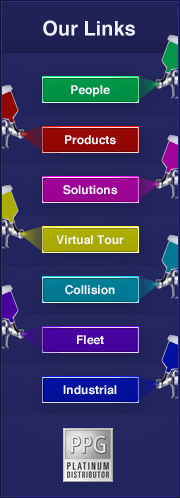
<style>
.page{position:relative;width:180px;height:498px}
.page>*{position:absolute;margin:0}
.t1{font:20px "Helvetica-Bold";color:#f2f2fa}
.t2{font:12px "Helvetica-Bold";color:#f2f2fa}
</style>
<div class="page">
<p class="t1" style="left:43px;top:20px;width:92px;height:16px">Our Links</p>
<p class="t2" style="left:71px;top:85px;width:39px;height:12px">People</p>
<p class="t2" style="left:65px;top:135px;width:51px;height:10px">Products</p>
<p class="t2" style="left:63px;top:185px;width:55px;height:10px">Solutions</p>
<p class="t2" style="left:56px;top:235px;width:68px;height:10px">Virtual Tour</p>
<p class="t2" style="left:65px;top:285px;width:50px;height:10px">Collision</p>
<p class="t2" style="left:77px;top:335px;width:27px;height:10px">Fleet</p>
<p class="t2" style="left:63px;top:385px;width:54px;height:10px">Industrial</p>
</div>
